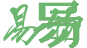
<style>
.page{position:relative;width:87px;height:48px;background:#ffffff}
.page>*{position:absolute;margin:0}
.t1{font:41.7px "WenYue-QingLongTi-NC-W5";color:#6cb670;font-weight:bold}
</style>
<div class="page">
<p class="t1" style="left:3px;top:4px;width:81px;height:42px">易物</p>
</div>
